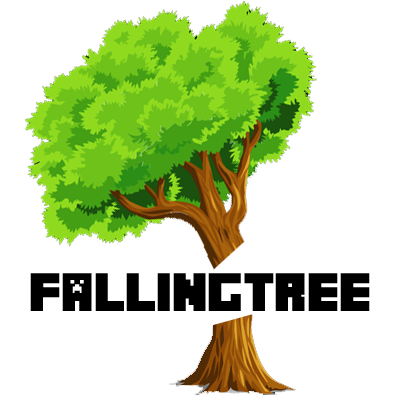
<style>
.page{position:relative;width:400px;height:400px;background:#ffffff}
.page>*{position:absolute;margin:0}
.t1{font:48px "Minecrafter";color:#000000}
</style>
<div class="page">
<p class="t1" style="left:30px;top:273px;width:340px;height:38px">FallingTree</p>
</div>
